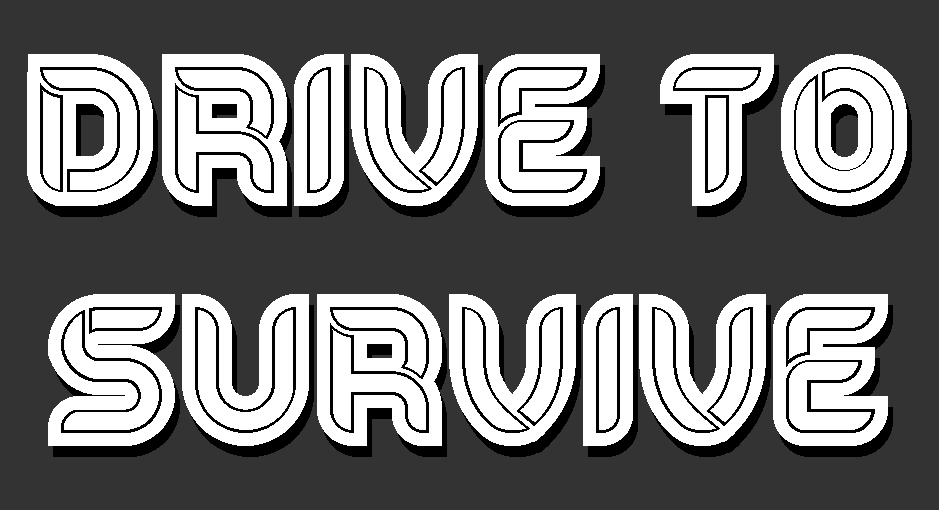
<style>
.page{position:relative;width:939px;height:510px;background:#333333}
.page>*{position:absolute;margin:0}
.t1{font:200px "Speed-Regular";color:#ffffff}
</style>
<div class="page">
<p class="t1" style="left:27px;top:54px;width:880px;height:392px;text-align:center">Drive to<br>Survive</p>
</div>
